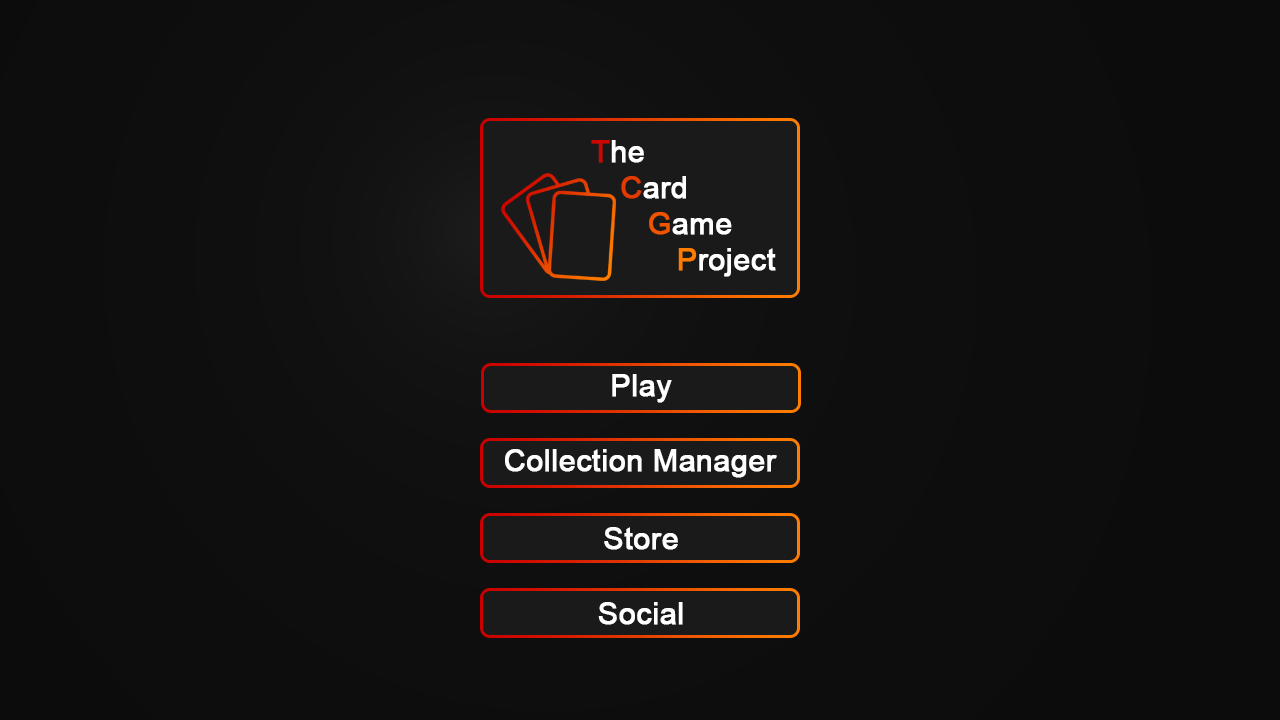
<style>
.page{position:relative;width:1280px;height:720px;background:#0d0d0d}
.page>*{position:absolute;margin:0}
.t1{font:30px "ArialMT";color:#ffffff;font-weight:bold}
.t2{font:30px "ArialMT";color:#cd0600;font-weight:bold}
.t3{font:30px "ArialMT";color:#e23a00;font-weight:bold}
.t4{font:30px "ArialMT";color:#ee5500;font-weight:bold}
.t5{font:30px "ArialMT";color:#fe7d00;font-weight:bold}
</style>
<div class="page">
<p class="t1" style="left:591px;top:140px;width:185px;height:137px;text-align:center"><span class="t2">T</span>he<br>  <span class="t3">C</span>ard<br>    <span class="t4">G</span>ame<br>      <span class="t5">P</span>roject</p>
<p class="t1" style="left:612px;top:374px;width:60px;height:29px">Play</p>
<p class="t1" style="left:505px;top:449px;width:272px;height:29px">Collection Manager</p>
<p class="t1" style="left:604px;top:527px;width:74px;height:23px">Store</p>
<p class="t1" style="left:598px;top:602px;width:85px;height:23px">Social</p>
</div>
